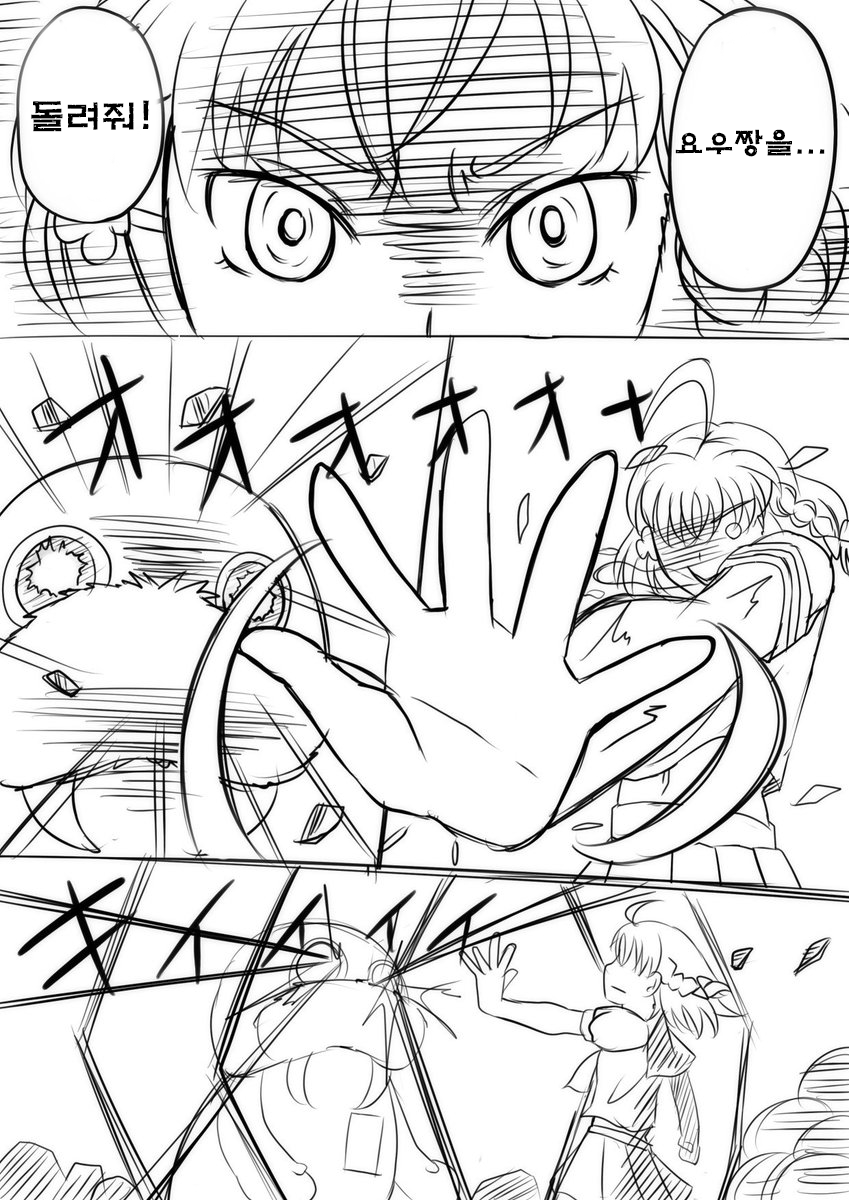
<style>
.page{position:relative;width:849px;height:1200px;background:#ffffff}
.page>*{position:absolute;margin:0}
.t1{font:36px "H2mkpB";color:#000000}
.t2{font:30px "H2mkpB";color:#000000}
</style>
<div class="page">
<p class="t1" style="left:31px;top:100px;width:118px;height:32px">돌려줘!</p>
<p class="t2" style="left:675px;top:129px;width:150px;height:28px">요우짱을...</p>
</div>
